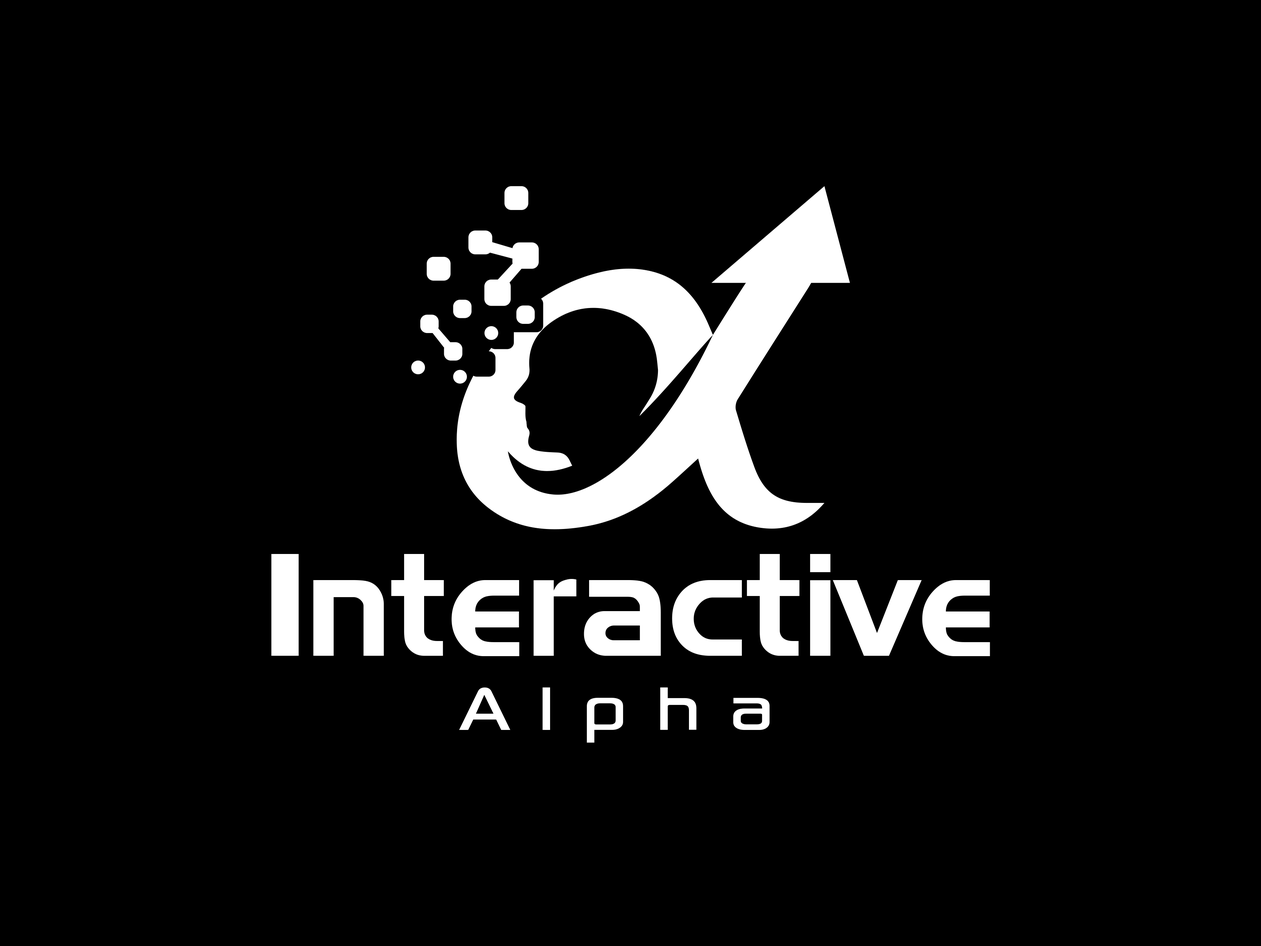
<style>
.page{position:relative;width:1261px;height:946px;background:#000000}
.page>*{position:absolute;margin:0}
.t1{font:145.8px "Denmark";color:#ffffff}
.t2{font:87px "SonySketchEF";letter-spacing:0.32em;color:#ffffff}
</style>
<div class="page">
<p class="t1" style="left:271px;top:554px;width:719px;height:102px">Interactive</p>
<p class="t2" style="left:459px;top:687px;width:311px;height:56px">Alpha</p>
</div>
